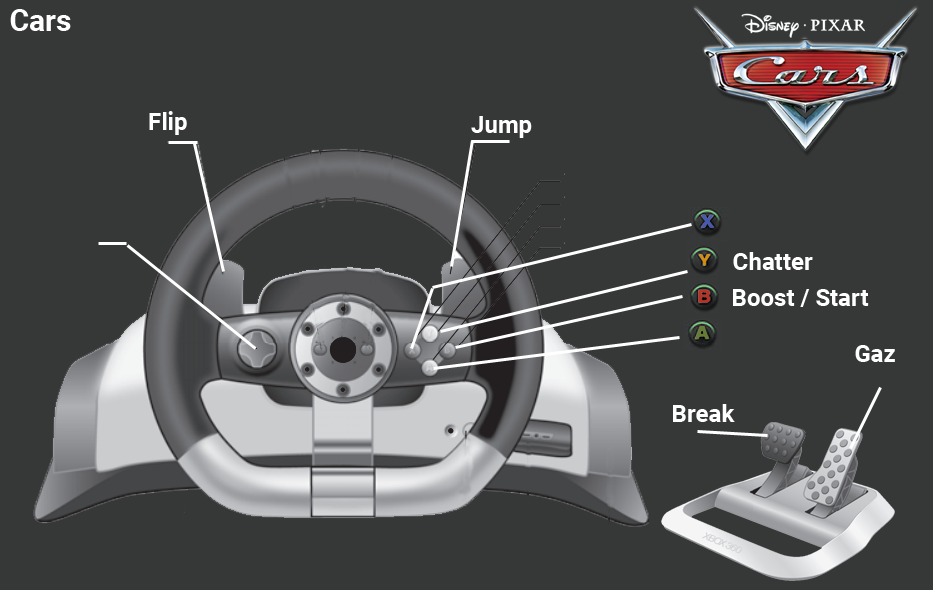
<style>
.page{position:relative;width:933px;height:590px;background:#363838}
.page>*{position:absolute;margin:0}
.t1{font:30px "Roboto-Bold";color:#ffffff}
.t2{font:24px "Roboto-Bold";color:#ffffff}
</style>
<div class="page">
<p class="t1" style="left:10px;top:9px;width:61px;height:22px">Cars</p>
<p class="t2" style="left:149px;top:111px;width:38px;height:24px">Flip</p>
<p class="t2" style="left:471px;top:116px;width:61px;height:22px">Jump</p>
<p class="t2" style="left:733px;top:252px;width:80px;height:18px">Chatter</p>
<p class="t2" style="left:733px;top:289px;width:136px;height:18px">Boost / Start</p>
<p class="t2" style="left:855px;top:345px;width:40px;height:17px">Gaz</p>
<p class="t2" style="left:673px;top:404px;width:62px;height:18px">Break</p>
</div>
